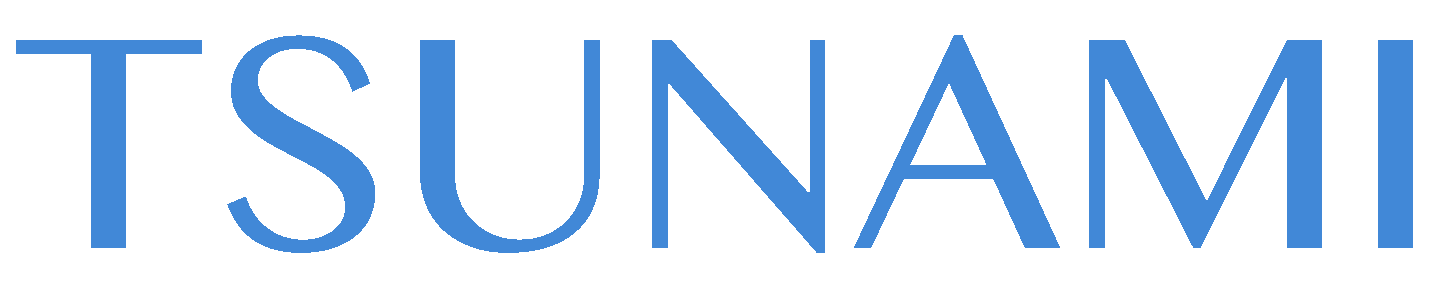
<style>
.page{position:relative;width:1440px;height:288px;background:#ffffff}
.page>*{position:absolute;margin:0}
.t1{font:320.5px "MalayalamMN";color:#4188d7}
</style>
<div class="page">
<p class="t1" style="left:16px;top:35px;width:1397px;height:218px">TSUNAMI</p>
</div>
